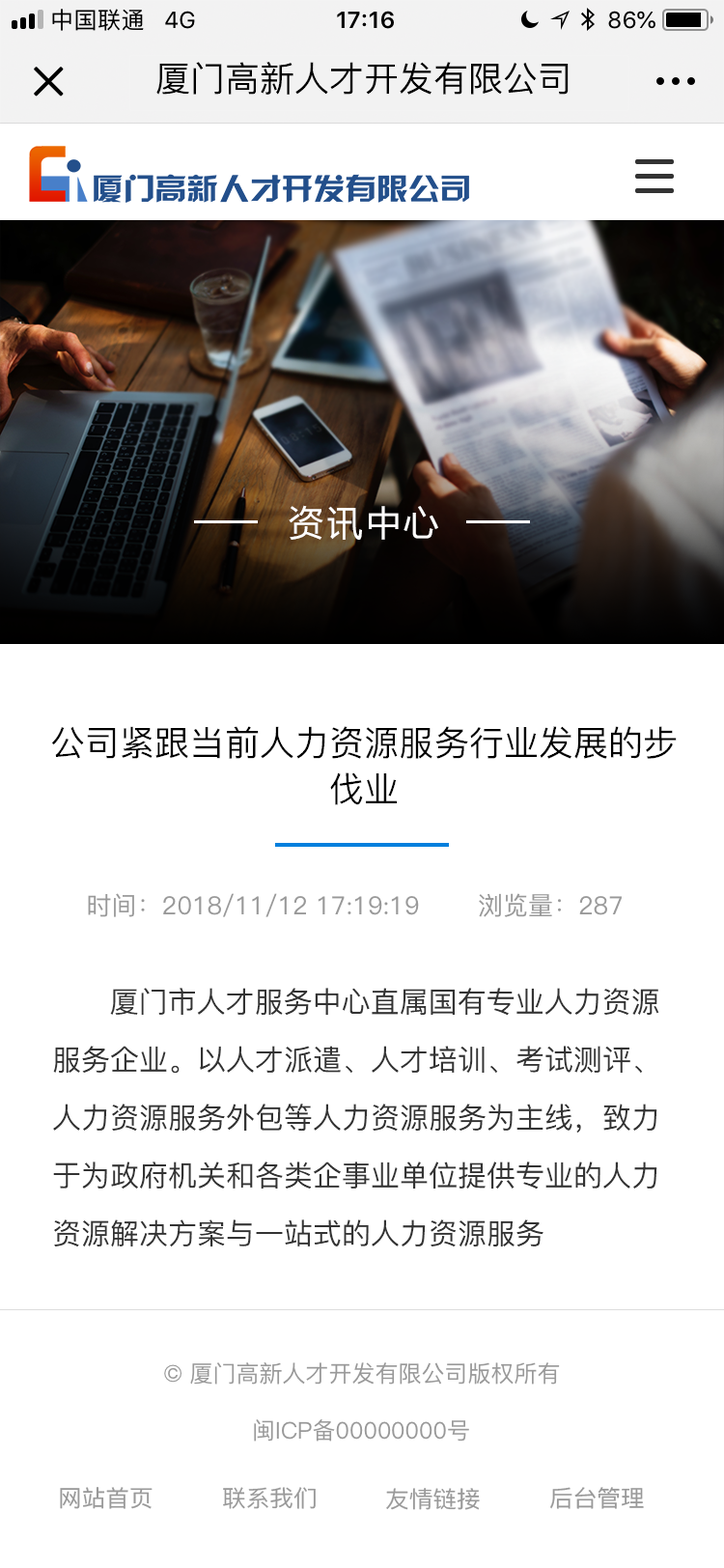
<style>
.page{position:relative;width:724px;height:1568px;background:#ffffff}
.page>*{position:absolute;margin:0}
.t1{font:34.8px "PingFang-SC-Medium";color:#000000}
.t2{font:34.8px "MicrosoftYaHei";letter-spacing:0.1em;color:#ffffff}
.t3{font:34.8px/46.3px "PingFang-SC-Medium";color:#000000}
.t4{font:25.1px "PingFang-SC-Medium";color:#999999}
.t5{font:29px/57.9px "PingFang-SC-Medium";color:#333333}
.t6{font:23.2px "PingFang-SC-Medium";color:#999999}
.t7{font:23.2px "PingFang-SC-Medium";color:#999999;text-transform:uppercase}
</style>
<div class="page">
<p class="t1" style="left:156px;top:62px;width:413px;height:33px">厦门高新人才开发有限公司</p>
<p class="t2" style="left:289px;top:505px;width:149px;height:35px">资讯中心</p>
<p class="t3" style="left:51px;top:726px;width:626px;height:79px;text-align:center">公司紧跟当前人力资源服务行业发展的步<br>伐业</p>
<p class="t4" style="left:88px;top:893px;width:534px;height:24px">时间：2018/11/12 17:19:19       浏览量：287</p>
<p class="t5" style="left:53px;top:988px;width:606px;height:258px">厦门市人才服务中心直属国有专业人力资源服务企业。以人才派遣、人才培训、考试测评、人力资源服务外包等人力资源服务为主线，致力于为政府机关和各类企事业单位提供专业的人力资源解决方案与一站式的人力资源服务</p>
<p class="t6" style="left:164px;top:1362px;width:396px;height:23px">© 厦门高新人才开发有限公司版权所有</p>
<p class="t6" style="left:254px;top:1419px;width:215px;height:23px">闽ICP备00000000号</p>
<p class="t6" style="left:60px;top:1487px;width:93px;height:22px">网站首页</p>
<p class="t6" style="left:223px;top:1487px;width:93px;height:22px">联系我们</p>
<p class="t6" style="left:386px;top:1488px;width:94px;height:22px">友情链接</p>
<p class="t7" style="left:550px;top:1487px;width:94px;height:22px">后台管理</p>
</div>
